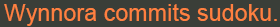
<style>
.page{position:relative;width:280px;height:27px;background:#3a3e38}
.page>*{position:absolute;margin:0}
.t1{font:23.3px "ArialMT";color:#ff8040}
</style>
<div class="page">
<p class="t1" style="left:4px;top:4px;width:273px;height:22px">Wynnora commits sudoku.</p>
</div>
